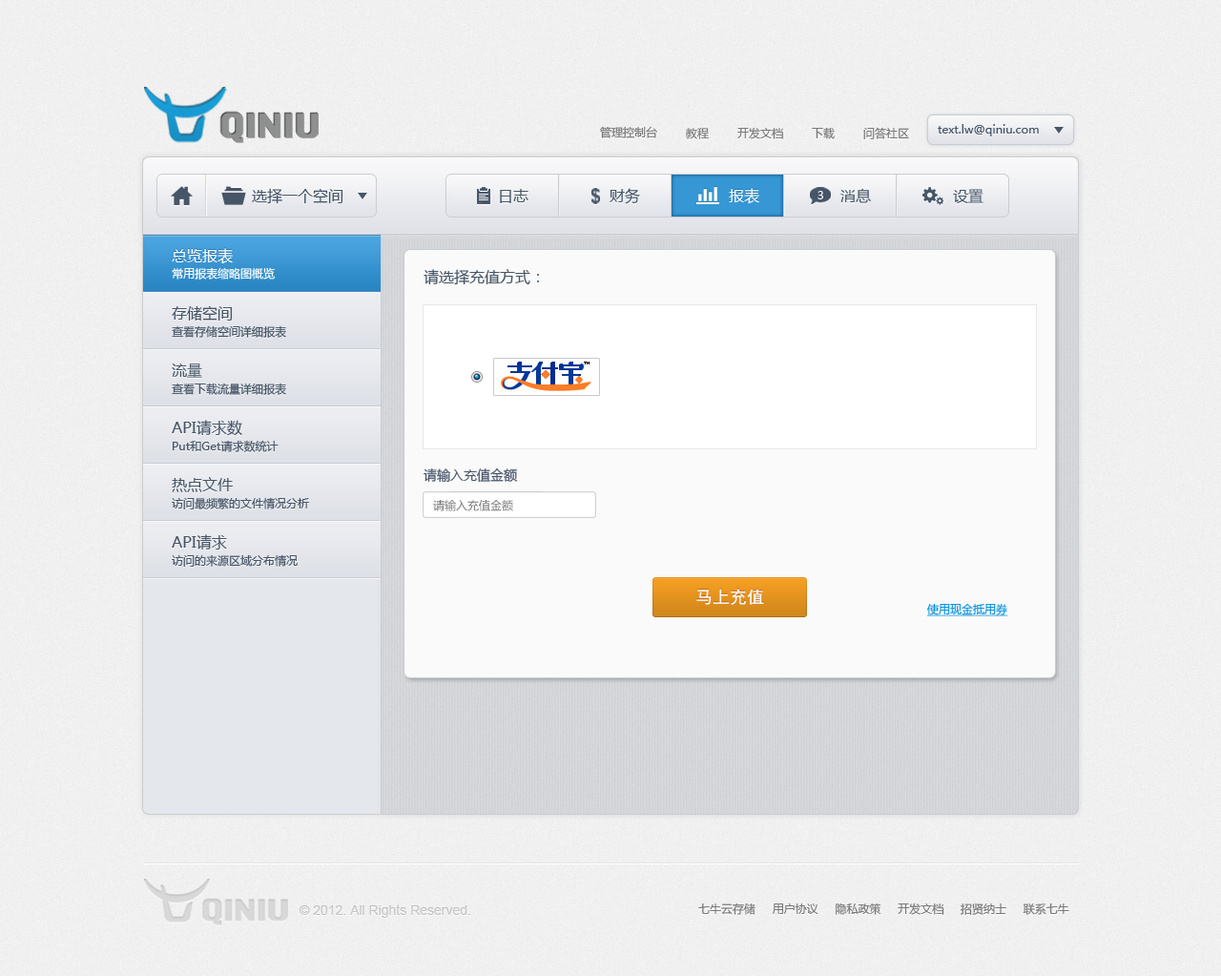
<style>
.page{position:relative;width:1221px;height:976px}
.page>*{position:absolute;margin:0}
.t1{font:11.5px "MicrosoftYaHei";color:#787878}
.t2{font:11.5px "MicrosoftYaHei";color:#465567}
.t3{font:15.3px "MicrosoftYaHei";color:#465567}
.t4{font:15.3px "MicrosoftYaHei";color:#ffffff}
.t5{font:11.5px "MicrosoftYaHei";color:#f8f8f9}
.t6{font:11.5px "MicrosoftYaHei";color:#ffffff}
.t7{font:13.4px "MicrosoftYaHei";color:#465567}
.t8{font:17.2px "SimHei";color:#ffffff}
.t9{font:11.5px "MicrosoftYaHei";color:#0c94de;text-decoration:underline}
.t10{font:13.4px "ArialMT";color:#c6c6c6}
</style>
<div class="page">
<p class="t1" style="left:600px;top:126px;width:57px;height:12px">管理控制台</p>
<p class="t2" style="left:938px;top:124px;width:101px;height:12px">text.lw@qiniu.com</p>
<p class="t1" style="left:686px;top:128px;width:24px;height:11px">教程</p>
<p class="t1" style="left:738px;top:127px;width:45px;height:12px">开发文档</p>
<p class="t1" style="left:812px;top:127px;width:23px;height:12px">下载</p>
<p class="t1" style="left:864px;top:127px;width:45px;height:12px">问答社区</p>
<p class="t3" style="left:252px;top:188px;width:92px;height:16px">选择一个空间</p>
<p class="t3" style="left:500px;top:189px;width:29px;height:14px">日志</p>
<p class="t3" style="left:610px;top:188px;width:30px;height:16px">财务</p>
<p class="t4" style="left:729px;top:188px;width:31px;height:16px">报表</p>
<p class="t5" style="left:818px;top:191px;width:6px;height:8px">3</p>
<p class="t3" style="left:841px;top:188px;width:30px;height:15px">消息</p>
<p class="t3" style="left:953px;top:189px;width:31px;height:14px">设置</p>
<p class="t4" style="left:172px;top:248px;width:61px;height:16px">总览报表</p>
<p class="t6" style="left:172px;top:267px;width:104px;height:13px">常用报表缩略图概览</p>
<p class="t3" style="left:424px;top:269px;width:115px;height:16px">请选择充值方式：</p>
<p class="t3" style="left:172px;top:305px;width:61px;height:16px">存储空间</p>
<p class="t2" style="left:172px;top:325px;width:114px;height:13px">查看存储空间详细报表</p>
<p class="t3" style="left:172px;top:364px;width:30px;height:14px">流量</p>
<p class="t2" style="left:172px;top:383px;width:114px;height:12px">查看下载流量详细报表</p>
<p class="t3" style="left:172px;top:420px;width:70px;height:16px">API请求数</p>
<p class="t2" style="left:173px;top:440px;width:106px;height:12px">Put和Get请求数统计</p>
<p class="t7" style="left:424px;top:469px;width:93px;height:14px">请输入充值金额</p>
<p class="t3" style="left:172px;top:477px;width:61px;height:15px">热点文件</p>
<p class="t2" style="left:172px;top:497px;width:137px;height:13px">访问最频繁的文件情况分析</p>
<p class="t1" style="left:433px;top:500px;width:80px;height:11px">请输入充值金额</p>
<p class="t3" style="left:172px;top:534px;width:55px;height:16px">API请求</p>
<p class="t2" style="left:172px;top:554px;width:126px;height:13px">访问的来源区域分布情况</p>
<p class="t8" style="left:697px;top:589px;width:67px;height:16px">马上充值</p>
<p class="t9" style="left:927px;top:603px;width:82px;height:13px">使用现金抵用券</p>
<p class="t10" style="left:299px;top:905px;width:171px;height:13px">© 2012. All Rights Reserved.</p>
<p class="t1" style="left:699px;top:903px;width:371px;height:12px">七牛云存储     用户协议     隐私政策     开发文档     招贤纳士     联系七牛</p>
</div>
